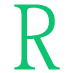
<style>
.page{position:relative;width:73px;height:73px;background:#ffffff}
.page>*{position:absolute;margin:0}
.t1{font:90px "MingLiU-ExtB";color:#0cc36f}
</style>
<div class="page">
<p class="t1" style="left:14px;top:4px;width:46px;height:66px">R</p>
</div>
